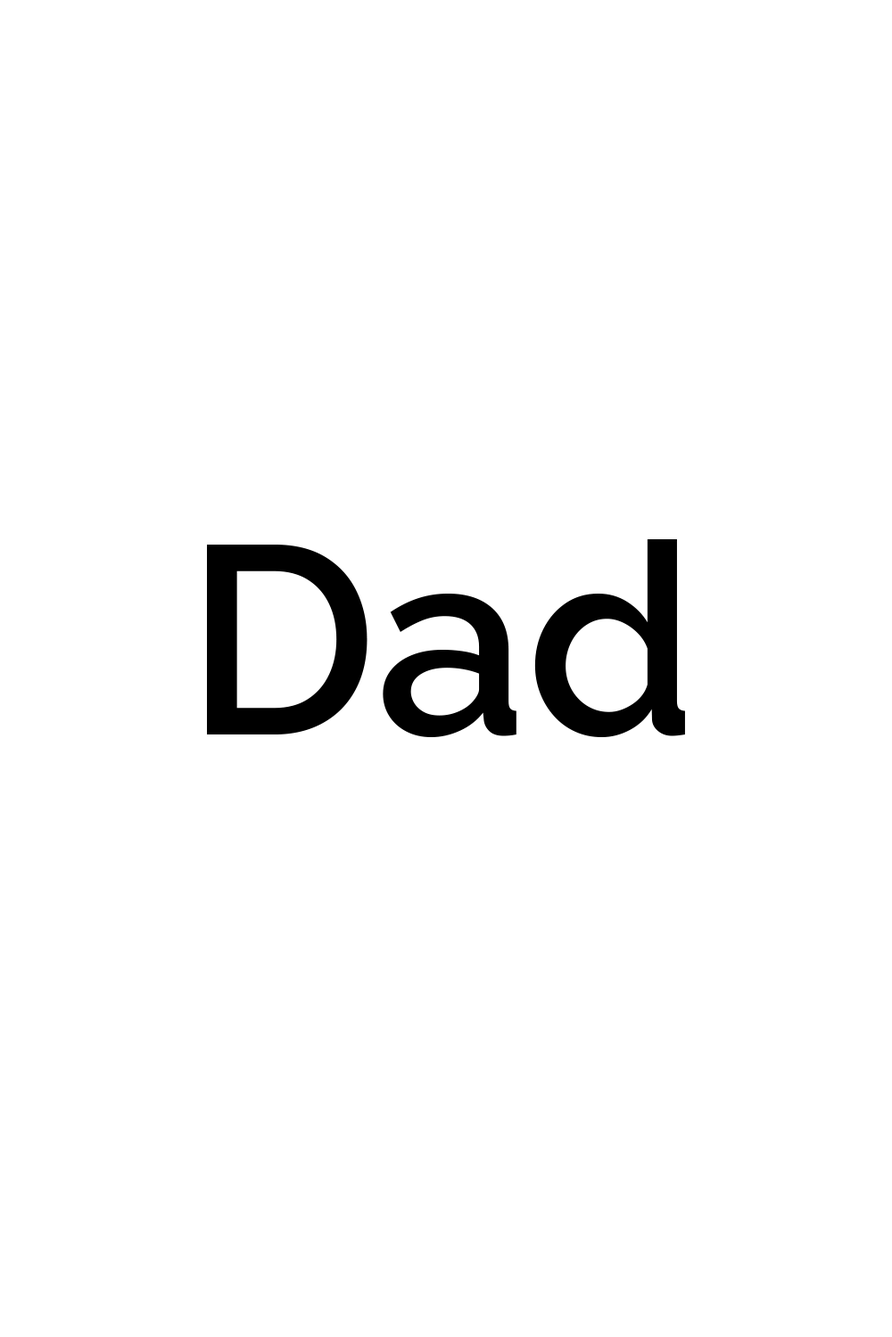
<style>
.page{position:relative;width:892px;height:1337px;background:#ffffff}
.page>*{position:absolute;margin:0}
.t1{font:267.5px "Raleway-SemiBold";color:#000000}
</style>
<div class="page">
<p class="t1" style="left:207px;top:539px;width:478px;height:198px">Dad</p>
</div>
